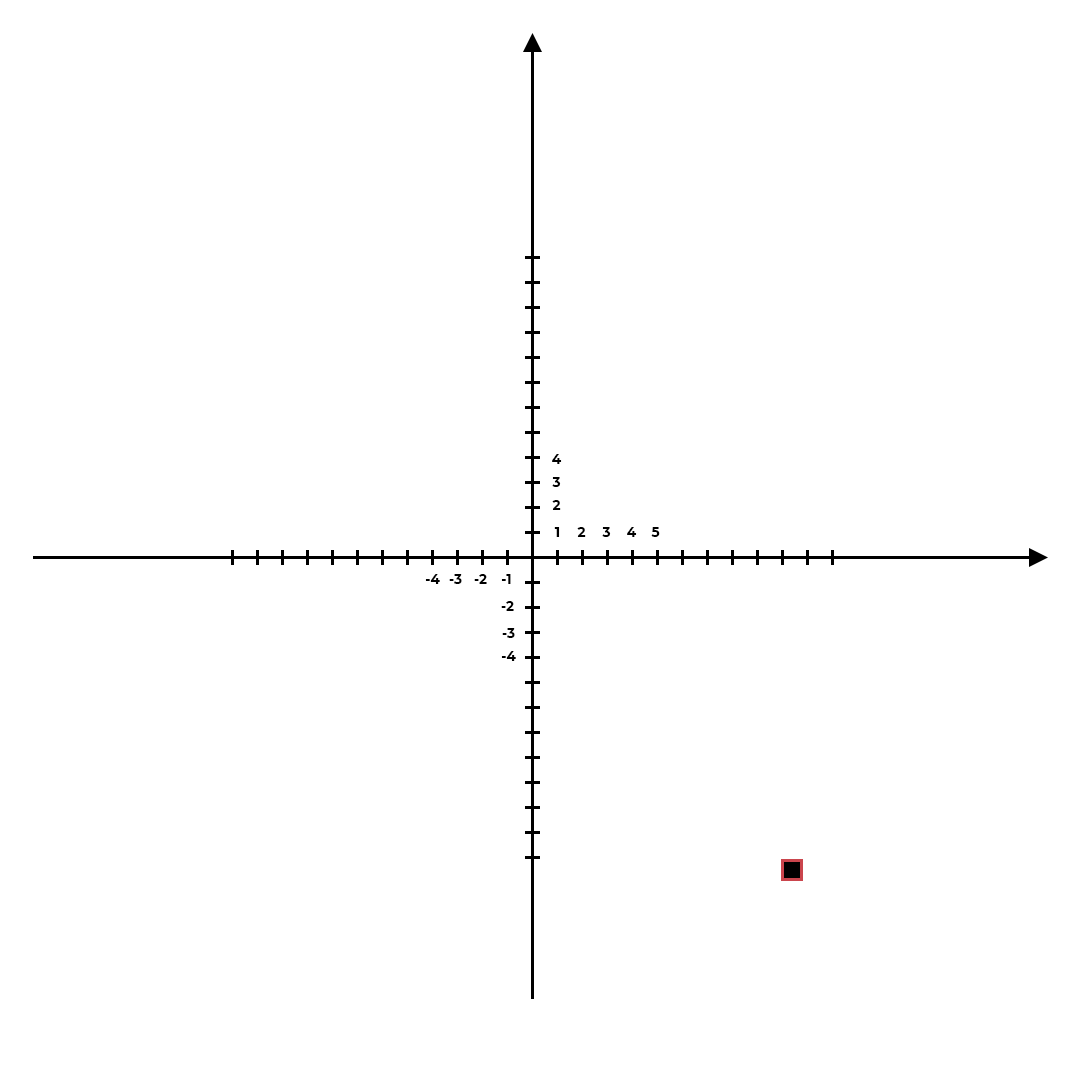
<style>
.page{position:relative;width:1080px;height:1080px;background:#ffffff}
.page>*{position:absolute;margin:0}
.t1{font:13.5px "Montserrat-Bold";color:#000000}
</style>
<div class="page">
<p class="t1" style="left:552px;top:454px;width:10px;height:10px">4</p>
<p class="t1" style="left:552px;top:477px;width:9px;height:10px">3</p>
<p class="t1" style="left:552px;top:500px;width:9px;height:10px">2</p>
<p class="t1" style="left:554px;top:527px;width:6px;height:10px">1</p>
<p class="t1" style="left:577px;top:527px;width:9px;height:10px">2</p>
<p class="t1" style="left:602px;top:527px;width:9px;height:10px">3</p>
<p class="t1" style="left:627px;top:527px;width:10px;height:10px">4</p>
<p class="t1" style="left:651px;top:527px;width:9px;height:10px">5</p>
<p class="t1" style="left:425px;top:574px;width:15px;height:10px">-4</p>
<p class="t1" style="left:449px;top:574px;width:13px;height:10px">-3</p>
<p class="t1" style="left:474px;top:574px;width:13px;height:10px">-2</p>
<p class="t1" style="left:501px;top:574px;width:10px;height:10px">-1</p>
<p class="t1" style="left:501px;top:601px;width:13px;height:10px">-2</p>
<p class="t1" style="left:502px;top:628px;width:13px;height:10px">-3</p>
<p class="t1" style="left:501px;top:651px;width:15px;height:10px">-4</p>
</div>
